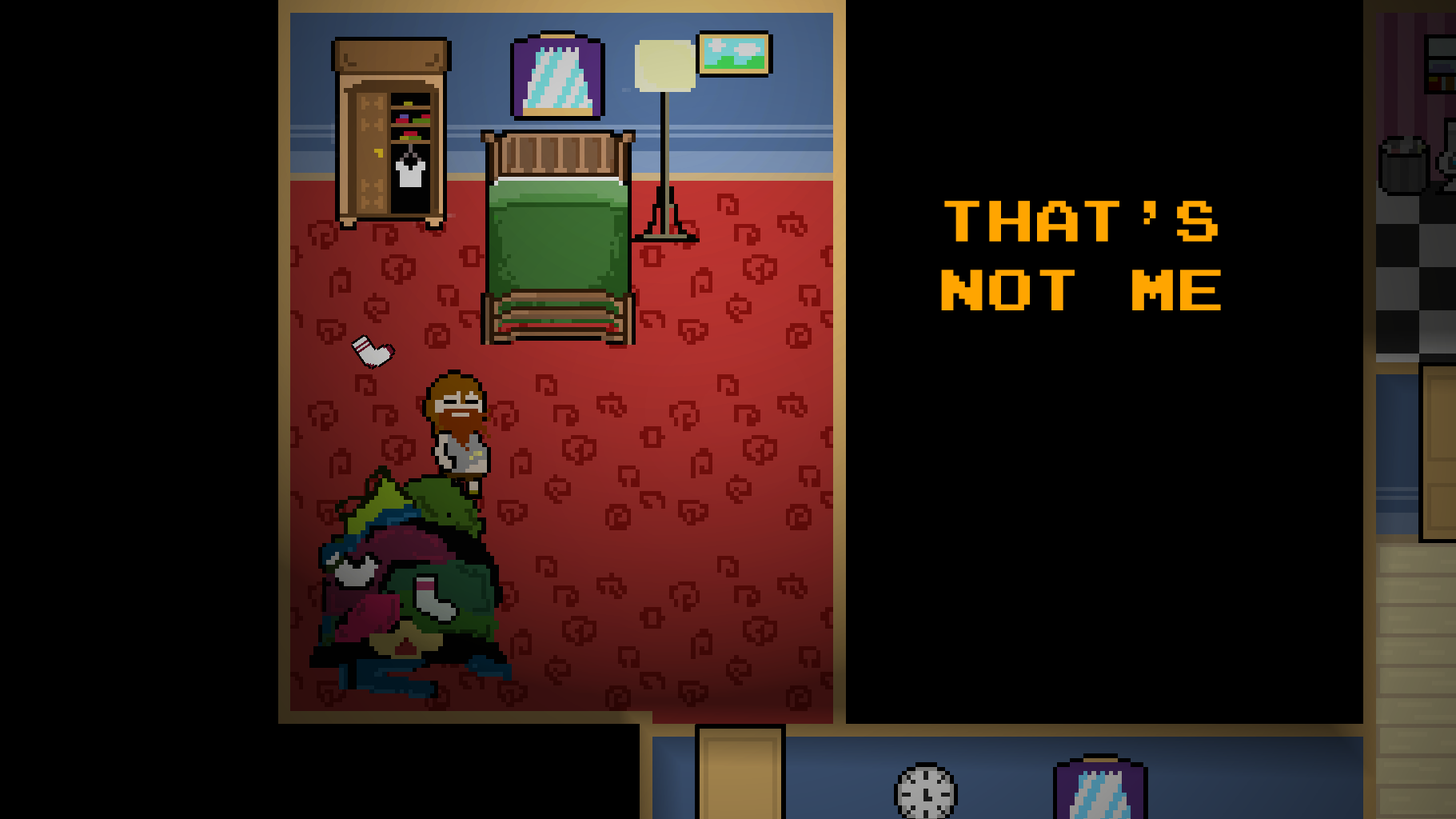
<style>
.page{position:relative;width:1456px;height:819px;background:#000000}
.page>*{position:absolute;margin:0}
.t1{font:57.6px "JoystixMonospace-Regular";color:#ffa500}
</style>
<div class="page">
<p class="t1" style="left:941px;top:201px;width:280px;height:109px">That’s <br>not ME</p>
</div>
